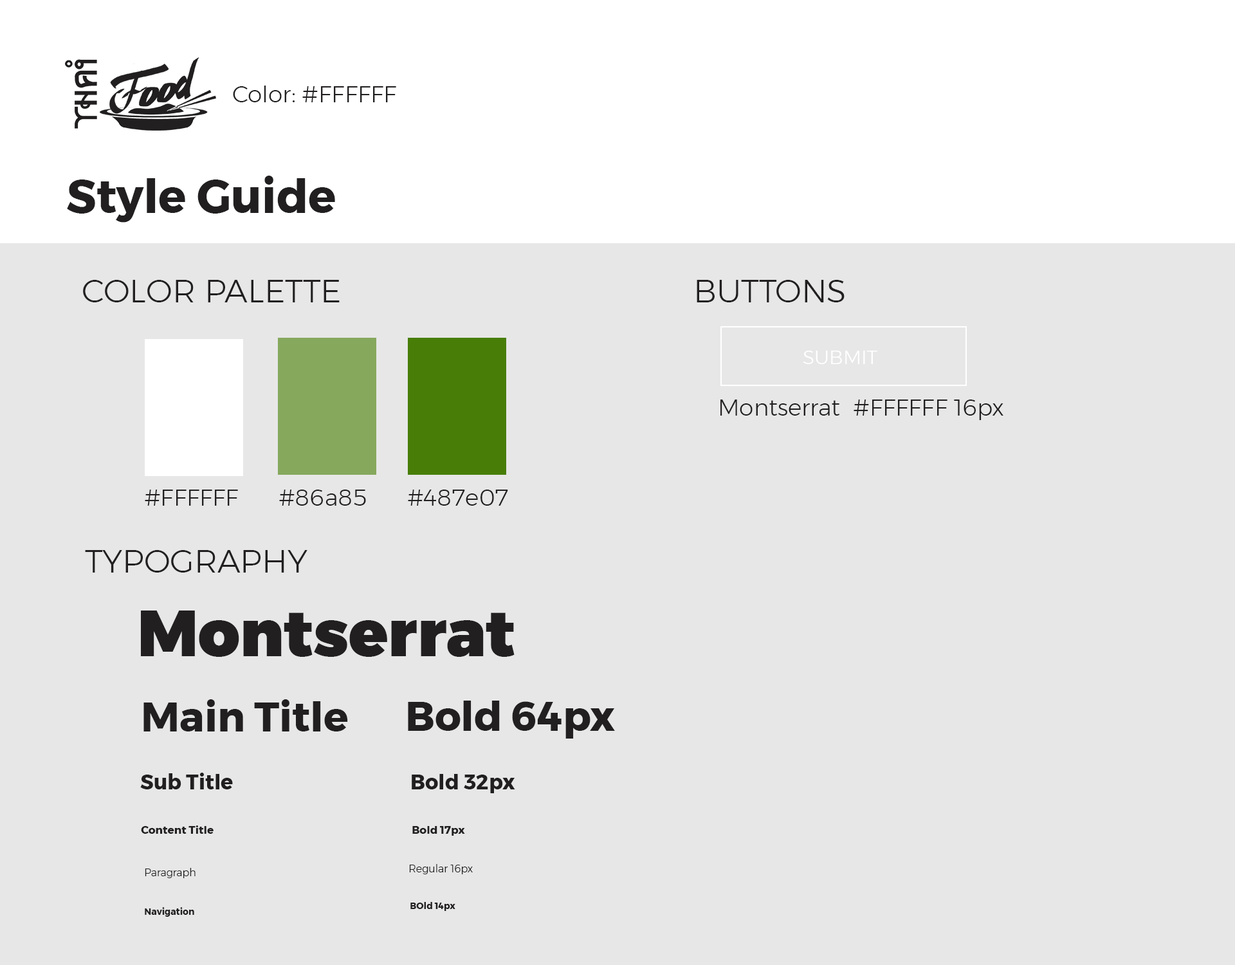
<style>
.page{position:relative;width:1235px;height:965px;background:#e7e7e7}
.page>*{position:absolute;margin:0}
.t1{font:23.2px "Montserrat-Light";color:#211f20}
.t2{font:46.3px "Montserrat-Bold";color:#211f20}
.t3{font:32.2px "Montserrat-Light";color:#211f20}
.t4{font:19.3px "Montserrat-Light";color:#ffffff}
.t5{font:64.3px "Montserrat-Black";color:#211f20}
.t6{font:41.2px "Montserrat-Bold";color:#211f20}
.t7{font:20.6px "Montserrat-Bold";color:#211f20}
.t8{font:10.9px "Montserrat-Bold";color:#211f20}
.t9{font:10.3px "Montserrat-Light";color:#211f20}
.t10{font:9px "Montserrat-Bold";color:#211f20}
</style>
<div class="page">
<p class="t1" style="left:233px;top:86px;width:163px;height:16px">Color: #FFFFFF</p>
<p class="t2" style="left:67px;top:176px;width:268px;height:47px">Style Guide</p>
<p class="t3" style="left:83px;top:280px;width:257px;height:22px">COLOR PALETTE</p>
<p class="t3" style="left:697px;top:280px;width:148px;height:22px">BUTTONS</p>
<p class="t4" style="left:804px;top:351px;width:74px;height:13px">SUBMIT</p>
<p class="t1" style="left:721px;top:400px;width:283px;height:20px">Montserrat  #FFFFFF 16px</p>
<p class="t1" style="left:145px;top:490px;width:93px;height:16px">#FFFFFF</p>
<p class="t1" style="left:279px;top:490px;width:87px;height:16px">#86a85</p>
<p class="t1" style="left:408px;top:490px;width:100px;height:16px">#487e07</p>
<p class="t3" style="left:85px;top:550px;width:223px;height:23px">TYPOGRAPHY</p>
<p class="t5" style="left:141px;top:611px;width:374px;height:46px">Montserrat</p>
<p class="t6" style="left:143px;top:699px;width:205px;height:33px">Main Title</p>
<p class="t6" style="left:408px;top:701px;width:207px;height:38px">Bold 64px</p>
<p class="t7" style="left:140px;top:773px;width:93px;height:17px">Sub Title</p>
<p class="t7" style="left:412px;top:774px;width:103px;height:19px">Bold 32px</p>
<p class="t8" style="left:141px;top:826px;width:73px;height:8px">Content Title</p>
<p class="t8" style="left:412px;top:826px;width:53px;height:10px">Bold 17px</p>
<p class="t9" style="left:145px;top:868px;width:51px;height:10px">Paragraph</p>
<p class="t9" style="left:409px;top:864px;width:64px;height:10px">Regular 16px</p>
<p class="t10" style="left:411px;top:902px;width:45px;height:9px">BOld 14px</p>
<p class="t10" style="left:145px;top:907px;width:49px;height:10px">Navigation</p>
</div>
